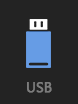
<style>
.page{position:relative;width:78px;height:104px;background:#232323}
.page>*{position:absolute;margin:0}
.t1{font:14px "SegoeUI";color:#7c7c7c;font-weight:bold}
</style>
<div class="page">
<p class="t1" style="left:27px;top:82px;width:25px;height:11px">USB</p>
</div>
